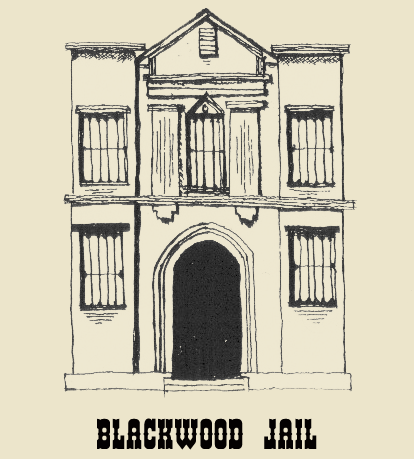
<style>
.page{position:relative;width:414px;height:459px;background:#ece5cb}
.page>*{position:absolute;margin:0}
.t1{font:37.5px "Helldorado";color:#040101}
</style>
<div class="page">
<p class="t1" style="left:97px;top:418px;width:220px;height:32px">Blackwood Jail</p>
</div>
